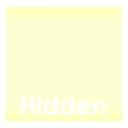
<style>
.page{position:relative;width:128px;height:128px;background:#fdffd2}
.page>*{position:absolute;margin:0}
.t1{font:25px "CenturyGothic-Bold";color:#ffffff}
</style>
<div class="page">
<p class="t1" style="left:21px;top:97px;width:84px;height:18px">Hidden</p>
</div>
